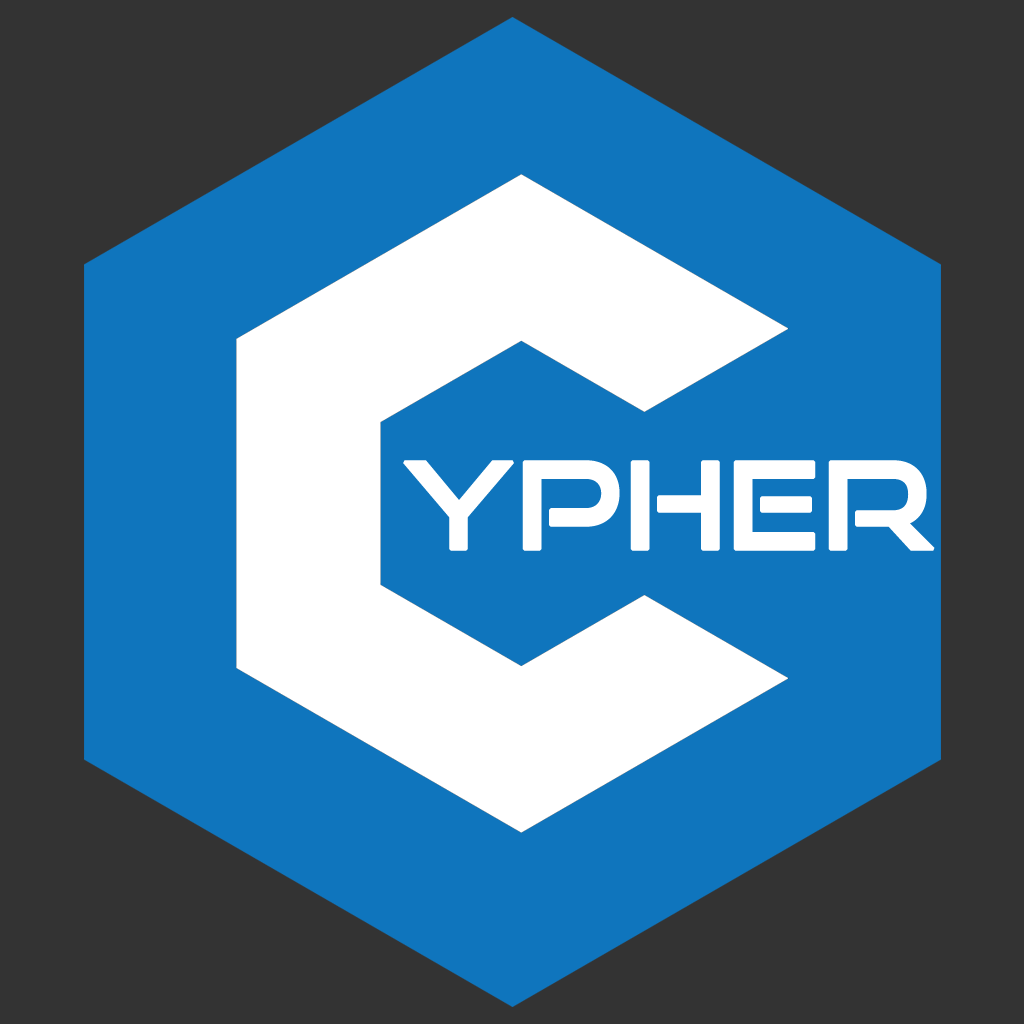
<style>
.page{position:relative;width:1024px;height:1024px;background:#0f75bd}
.page>*{position:absolute;margin:0}
.t1{font:120px "GoodTimesRg-Regular";color:#ffffff;font-weight:bold}
</style>
<div class="page">
<p class="t1" style="left:403px;top:460px;width:532px;height:91px">ypher</p>
</div>
